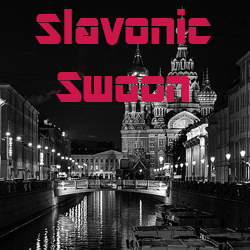
<style>
.page{position:relative;width:250px;height:250px}
.page>*{position:absolute;margin:0}
.t1{font:48px "ARDESTINE";color:#cb1649}
</style>
<div class="page">
<p class="t1" style="left:35px;top:9px;width:177px;height:93px;text-align:center">Slavonic<br>Swoon</p>
</div>
